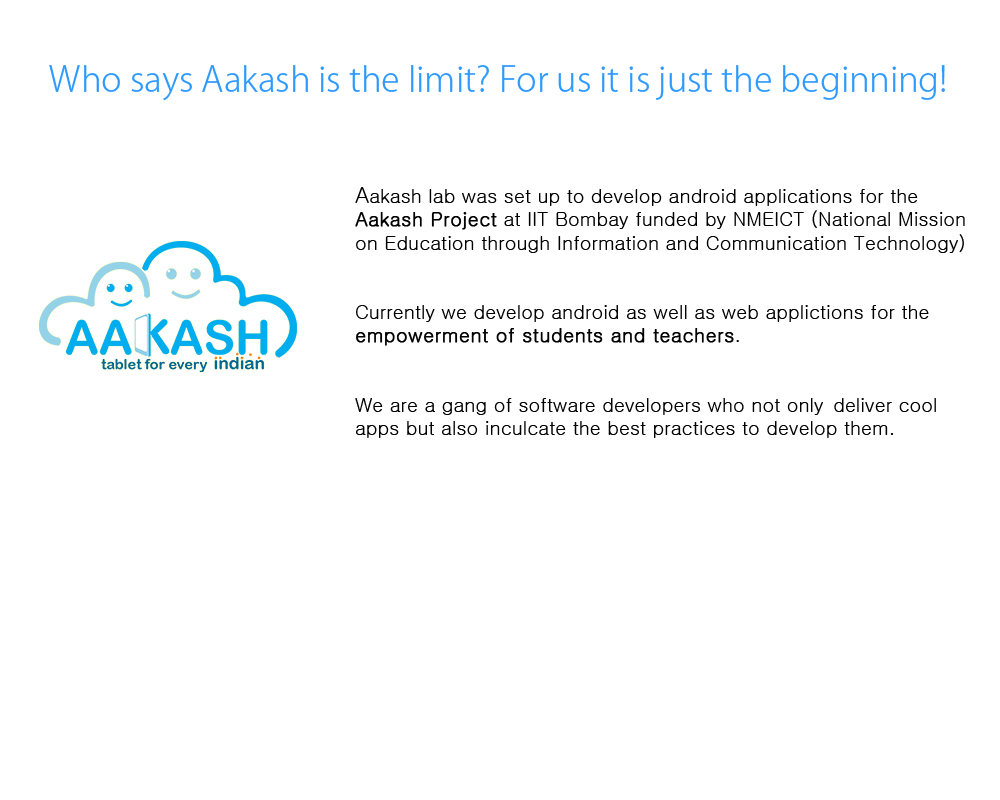
<style>
.page{position:relative;width:1000px;height:800px;background:#ffffff}
.page>*{position:absolute;margin:0}
.t1{font:34.4px "KozGoPro-Light";color:#2e9aff}
.t2{font:19.3px "Gulim";color:#000000}
.t3{font:22.1px "Gulim";color:#000000}
.t4{font:19.3px "Gulim";color:#000000;font-weight:bold}
</style>
<div class="page">
<p class="t1" style="left:49px;top:65px;width:896px;height:36px">Who says Aakash is the limit? For us it is just the beginning!</p>
<p class="t2" style="left:355px;top:187px;width:610px;height:251px"><span class="t3">A</span>akash lab was set up to develop android applications for the <span class="t4">Aakash Project</span> at IIT Bombay funded by NMEICT (National Mission on Education through Information and Communication Technology)<br><br><br>Currently we develop android as well as web applictions for the   <span class="t4">empowerment of students and teachers</span>. <br><br><br>We are a gang of software developers who not only  deliver cool apps but also inculcate the best practices to develop them.</p>
</div>
